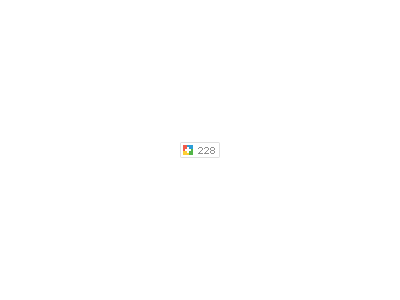
<style>
.page{position:relative;width:400px;height:300px;background:#ffffff}
.page>*{position:absolute;margin:0}
.t1{font:10px "ArialMT";letter-spacing:0.025em;color:#8e8e8e}
</style>
<div class="page">
<p class="t1" style="left:198px;top:147px;width:17px;height:7px">228</p>
</div>
